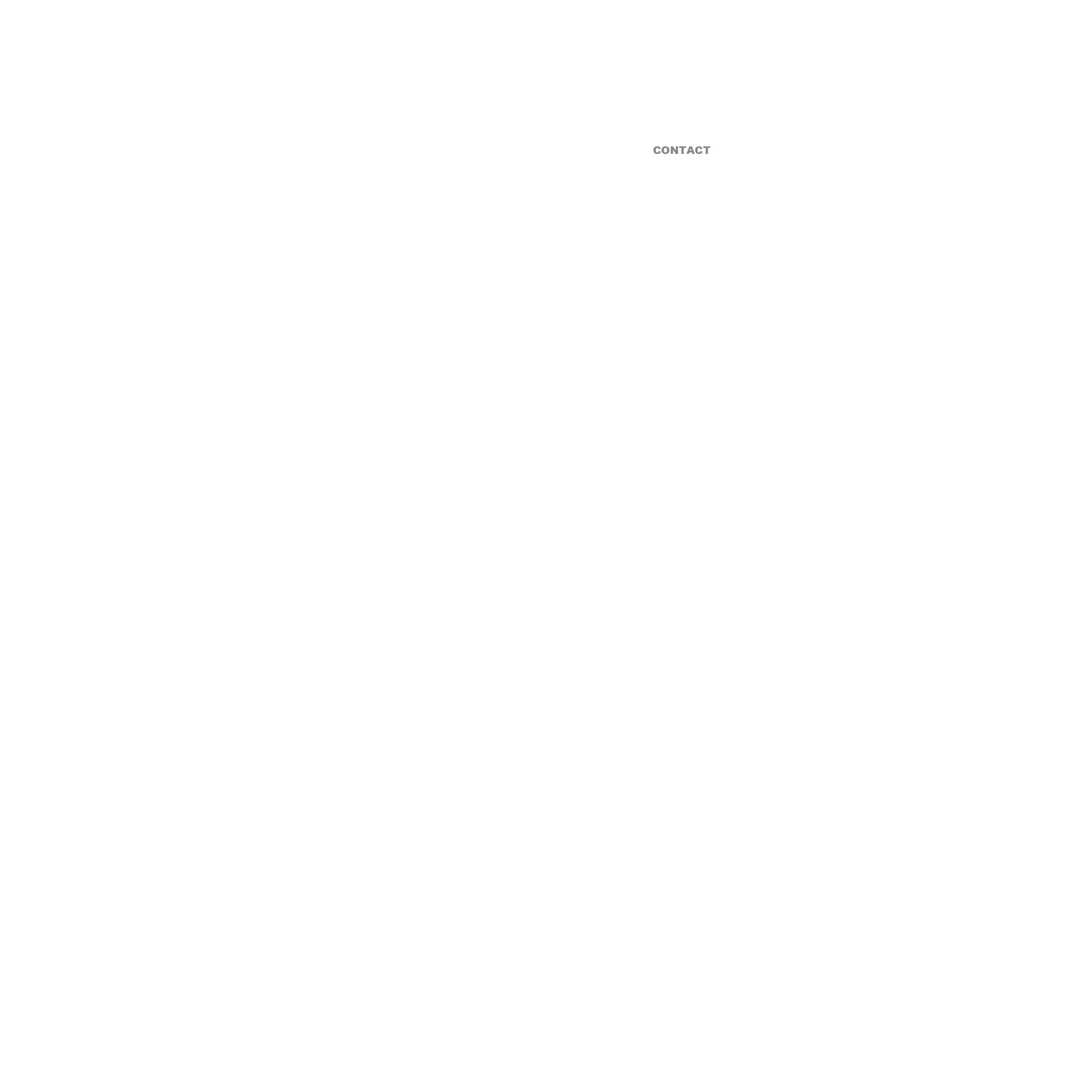
<style>
.page{position:relative;width:1092px;height:1092px;background:#ffffff}
.page>*{position:absolute;margin:0}
.t1{font:10.6px "Arial-Black";color:#898989}
</style>
<div class="page">
<p class="t1" style="left:653px;top:146px;width:58px;height:8px">CONTACT</p>
</div>
